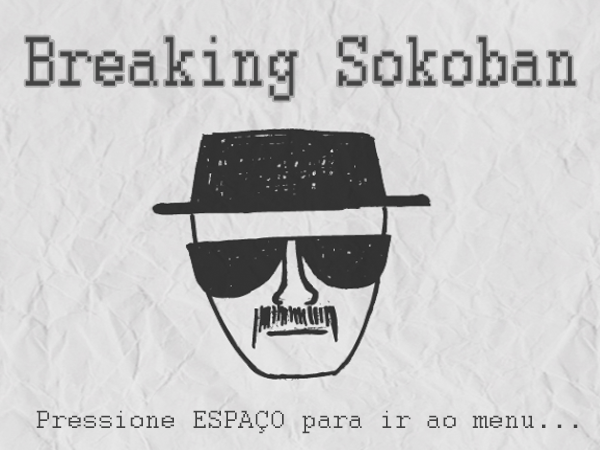
<style>
.page{position:relative;width:600px;height:450px}
.page>*{position:absolute;margin:0}
.t1{font:27.8px "Courier";color:#434343}
</style>
<div class="page">
<p class="t1" style="left:36px;top:410px;width:542px;height:24px">Pressione ESPAÇO para ir ao menu...</p>
</div>
